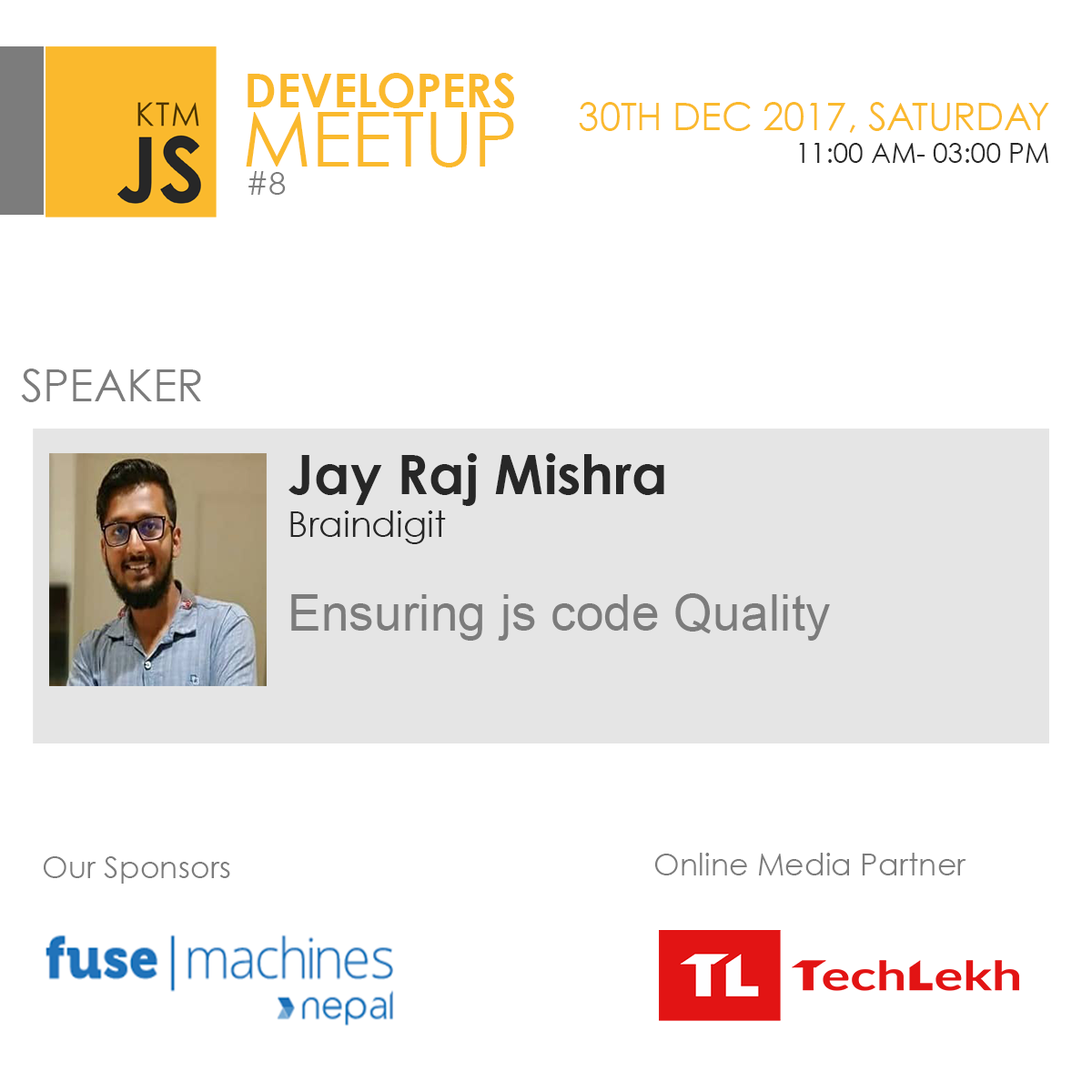
<style>
.page{position:relative;width:1092px;height:1092px;background:#ffffff}
.page>*{position:absolute;margin:0}
.t1{font:46px "CenturyGothic-Bold";color:#fab92d}
.t2{font:37.9px "CenturyGothic";color:#fab92d;text-transform:uppercase}
.t3{font:27.3px "CenturyGothic";color:#272727;text-transform:uppercase}
.t4{font:75.3px "CenturyGothic";color:#fab92d}
.t5{font:32.2px "CenturyGothic";color:#7c7c7c}
.t6{font:44.6px "CenturyGothic";color:#7c7c7c}
.t7{font:54.8px "CenturyGothic-Bold";color:#272727}
.t8{font:35.4px "CenturyGothic";color:#272727}
.t9{font:50.4px "ArialMT";color:#7c7c7c}
.t10{font:30.3px "CenturyGothic";color:#7c7c7c}
</style>
<div class="page">
<p class="t1" style="left:248px;top:73px;width:266px;height:35px">DEVELOPERS</p>
<p class="t2" style="left:579px;top:102px;width:470px;height:61px;text-align:right">30th DEC 2017, Saturday<br><span class="t3">11:00 AM- 03:00 PM</span></p>
<p class="t4" style="left:246px;top:112px;width:268px;height:55px">MEETUP</p>
<p class="t5" style="left:248px;top:171px;width:38px;height:24px">#8</p>
<p class="t6" style="left:21px;top:369px;width:180px;height:33px">SPEAKER</p>
<p class="t7" style="left:288px;top:453px;width:376px;height:91px">Jay Raj Mishra <br><span class="t8">Braindigit</span></p>
<p class="t9" style="left:291px;top:593px;width:539px;height:48px">Ensuring js code Quality</p>
<p class="t10" style="left:44px;top:856px;width:186px;height:28px">Our Sponsors</p>
<p class="t10" style="left:655px;top:853px;width:311px;height:22px">Online Media Partner</p>
</div>
